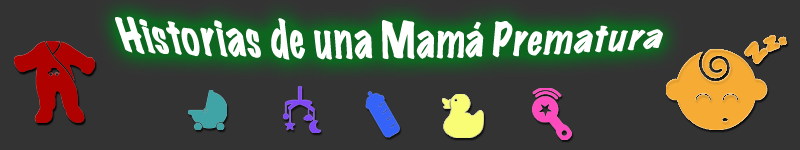
<style>
.page{position:relative;width:800px;height:150px;background:#333333}
.page>*{position:absolute;margin:0}
.t1{font:36px "MarkerFelt-Wide";color:#ffffff}
</style>
<div class="page">
<p class="t1" style="left:115px;top:16px;width:548px;height:44px">Historias de una Mamá Prematura</p>
</div>
